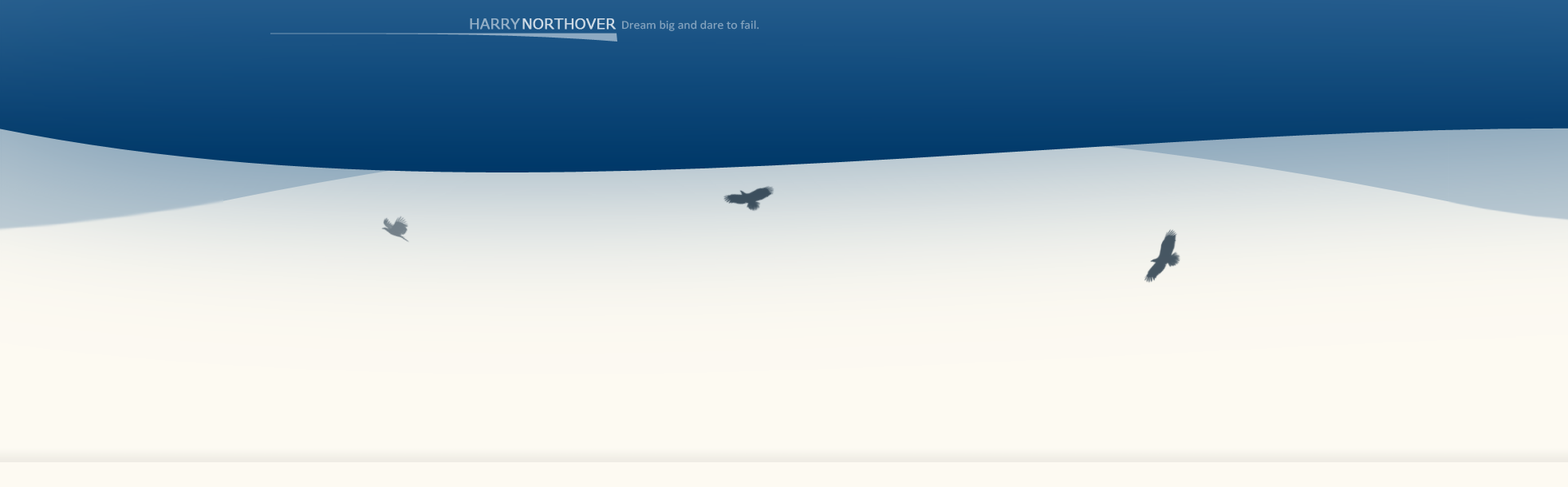
<style>
.page{position:relative;width:1568px;height:487px;background:#fdfaf2}
.page>*{position:absolute;margin:0}
.t1{font:13.4px "Meiryo";color:#93aec6;text-transform:uppercase;font-weight:bold;scale:1.08 1}
.t2{font:13.4px "MeiryoUI";color:#cedae5;text-transform:uppercase;font-weight:bold;scale:1.08 1}
.t3{font:11.9px "Calibri";color:#85a4be;scale:1.08 1}
</style>
<div class="page">
<p class="t1" style="left:470px;top:18px;width:50px;height:12px">harry</p>
<p class="t2" style="left:522px;top:18px;width:95px;height:12px">northover</p>
<p class="t3" style="left:622px;top:20px;width:137px;height:11px">Dream big and dare to fail.</p>
</div>
